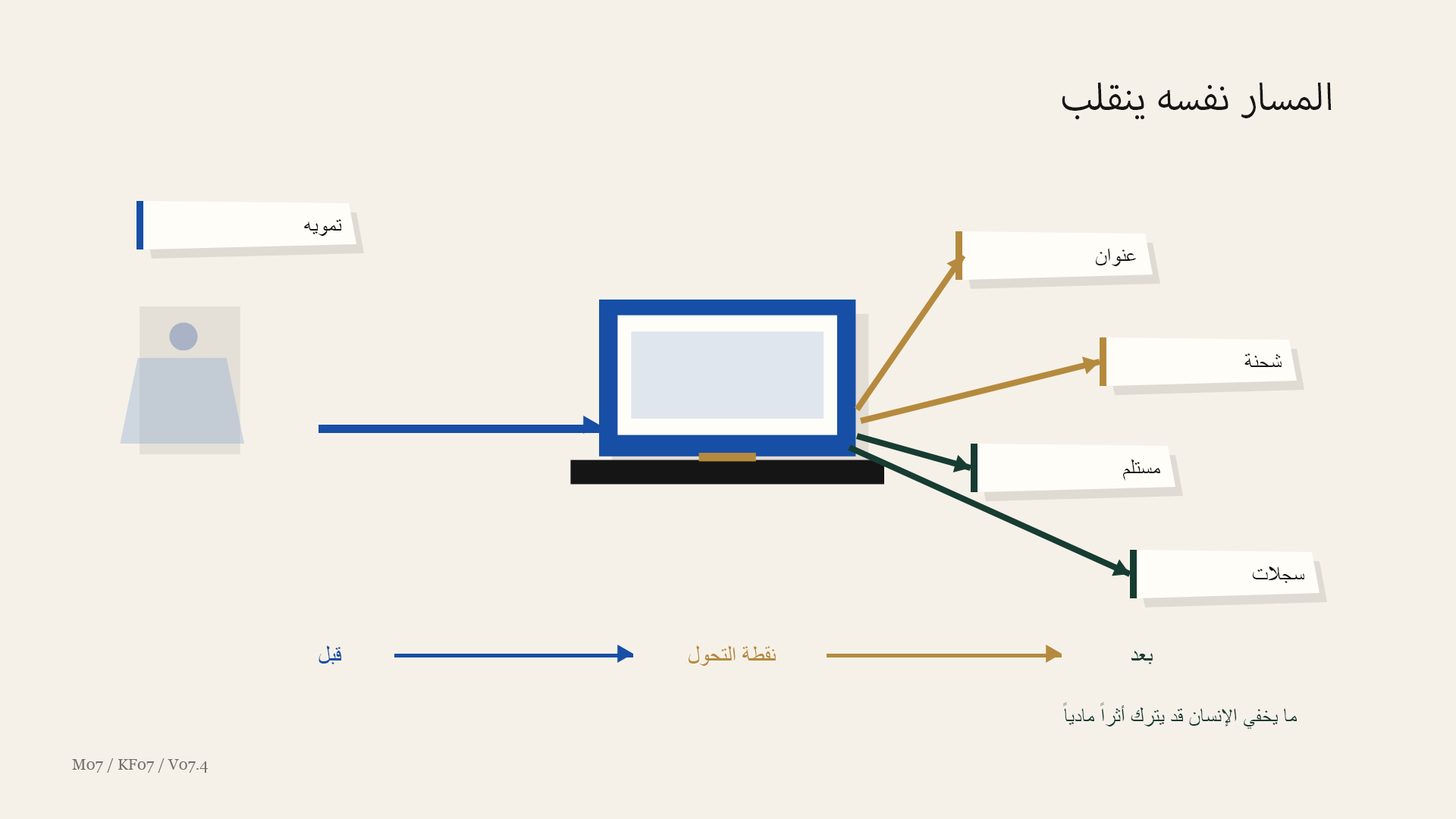
<style>
.page{position:relative;width:1456px;height:819px;background:#f6f1e8}
.page>*{position:absolute;margin:0}
.t1{font:53.1px "MyriadArabic-Regular";color:#151515}
.t2{font:22px "ArialMT";color:#151515}
.t3{font:65.1px "ArialMT";color:#aab2c5}
.t4{font:22.7px "ArialMT";color:#174fa6}
.t5{font:22.7px "ArialMT";color:#b58a3e}
.t6{font:22.7px "ArialMT";color:#173c32}
.t7{font:21.2px "ArialMT";color:#173c32}
.t8{font:15.2px "Georgia";color:#716f6b}
</style>
<div class="page">
<p class="t1" style="left:1062px;top:82px;width:270px;height:38px">المسار نفسه ينقلب</p>
<p class="t2" style="left:303px;top:219px;width:38px;height:17px">تمويه</p>
<p class="t2" style="left:1096px;top:248px;width:40px;height:18px">عنوان</p>
<p class="t3" style="left:169px;top:322px;width:29px;height:28px">●</p>
<p class="t2" style="left:1244px;top:353px;width:38px;height:14px">شحنة</p>
<p class="t2" style="left:1123px;top:459px;width:37px;height:22px">مستلم</p>
<p class="t2" style="left:1252px;top:566px;width:52px;height:17px">سجلات</p>
<p class="t4" style="left:318px;top:645px;width:23px;height:19px">قبل</p>
<p class="t5" style="left:689px;top:645px;width:87px;height:21px">نقطة التحول</p>
<p class="t6" style="left:1131px;top:651px;width:22px;height:13px">بعد</p>
<p class="t7" style="left:1063px;top:702px;width:234px;height:27px">ما يخفي الإنسان قد يترك أثراً مادياً</p>
<p class="t8" style="left:72px;top:758px;width:136px;height:15px">M07 / KF07 / V07.4</p>
</div>
